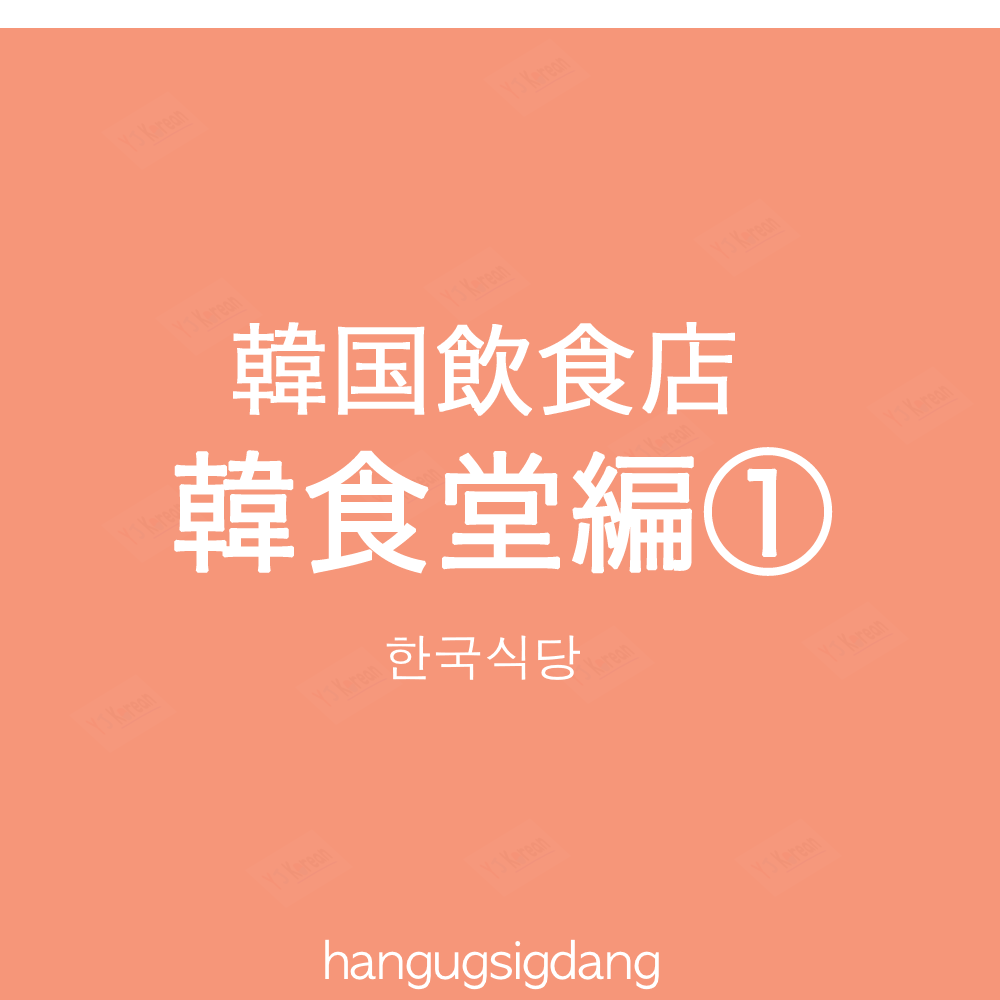
<style>
.page{position:relative;width:1000px;height:1000px;background:#f69679}
.page>*{position:absolute;margin:0}
.t1{font:100px "HiraKakuProN-W3";color:#ffffff;font-weight:bold}
.t2{font:130px "HiraKakuProN-W3";color:#ffffff;font-weight:bold}
.t3{font:50px "AppleGothic";color:#ffffff}
</style>
<div class="page">
<p class="t1" style="left:233px;top:322px;width:502px;height:94px">韓国飲食店</p>
<p class="t2" style="left:174px;top:447px;width:659px;height:129px">韓食堂編①</p>
<p class="t3" style="left:386px;top:635px;width:194px;height:45px">한국식당</p>
<p class="t3" style="left:325px;top:939px;width:334px;height:51px">hangugsigdang</p>
</div>
